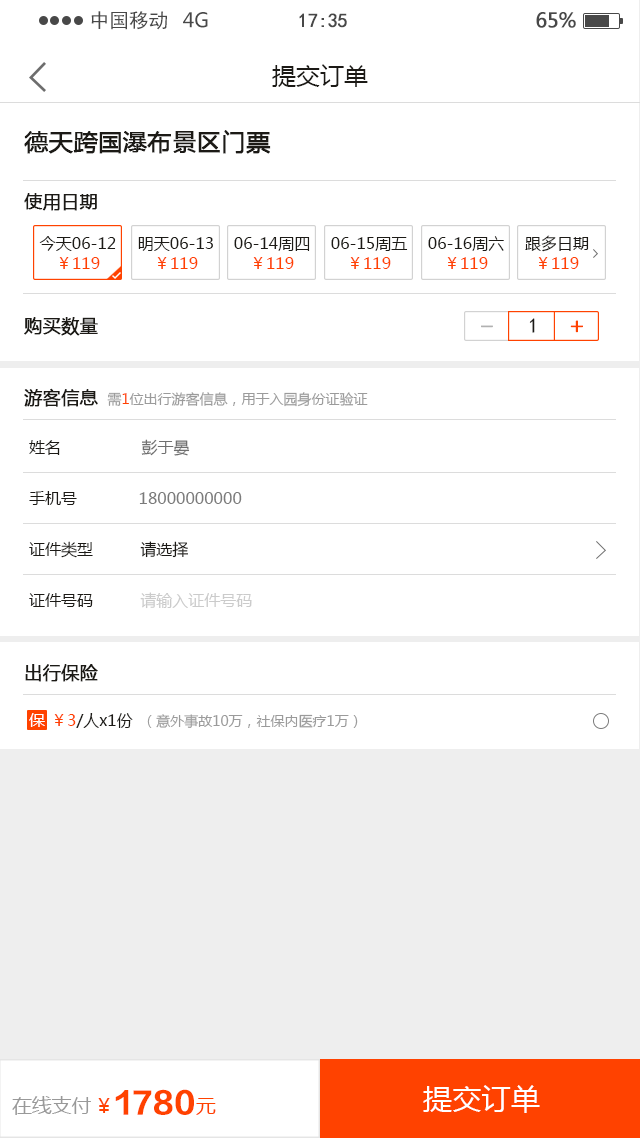
<style>
.page{position:relative;width:640px;height:1138px;background:#ffffff}
.page>*{position:absolute;margin:0}
.t1{font:19.7px "SimHei";color:#484848}
.t2{font:19.7px "MicrosoftYaHei";color:#484848}
.t3{font:19.7px "SimHei";letter-spacing:-0.022em;color:#484848;font-weight:bold}
.t4{font:19.7px "MicrosoftYaHei";letter-spacing:-0.022em;color:#484848;font-weight:bold}
.t5{font:24px "MicrosoftYaHei";color:#1c1a16}
.t6{font:24px "MicrosoftYaHei";color:#1c1a16;font-weight:bold}
.t7{font:18px "MicrosoftYaHei";color:#1c1a16;font-weight:bold}
.t8{font:16px/20px "MicrosoftYaHei";color:#1c1a16}
.t9{font:16px/20px "MicrosoftYaHei";color:#ff4200}
.t10{font:21.1px "SimHei";color:#1c1a16}
.t11{font:21.1px "Tensentype-BoDangXingKaiJ";color:#b1b1b1;font-weight:bold}
.t12{font:21.1px "Tensentype-BoDangXingKaiJ";color:#ff4200;font-weight:bold}
.t13{font:14px "MicrosoftYaHei";color:#9b9b9b}
.t14{font:14px "MicrosoftYaHei";color:#ff4200}
.t15{font:16px "MicrosoftYaHei";color:#6f6f6f}
.t16{font:16px "MicrosoftYaHei";color:#1c1a16}
.t17{font:16px "MicrosoftYaHei";color:#7b7b7b}
.t18{font:16px "MicrosoftYaHei";color:#cbcbcb}
.t19{font:16px "MicrosoftYaHei";color:#ffffff}
.t20{font:16px "MicrosoftYaHei";color:#ff4200}
.t21{font:29.3px "MicrosoftYaHei";color:#ffffff}
.t22{font:19.8px "MicrosoftYaHei";color:#999999}
.t23{font:30px "FZLTDHK--GBK1-0";color:#ff4200}
.t24{font:19.8px "MicrosoftYaHei";color:#ff4200}
</style>
<div class="page">
<p class="t1" style="left:91px;top:11px;width:76px;height:19px">中国移动</p>
<p class="t2" style="left:183px;top:12px;width:25px;height:16px">4G</p>
<p class="t3" style="left:299px;top:13px;width:48px;height:15px">17:35</p>
<p class="t4" style="left:536px;top:12px;width:40px;height:16px">65%</p>
<p class="t5" style="left:272px;top:64px;width:96px;height:23px">提交订单</p>
<p class="t6" style="left:24px;top:130px;width:247px;height:24px">德天跨国瀑布景区门票</p>
<p class="t7" style="left:24px;top:193px;width:73px;height:18px">使用日期</p>
<p class="t8" style="left:39px;top:236px;width:77px;height:33px;text-align:center">今天06-12<br><span class="t9">￥119</span></p>
<p class="t8" style="left:138px;top:237px;width:75px;height:32px;text-align:center">明天06-13<br><span class="t9">￥119</span></p>
<p class="t8" style="left:234px;top:237px;width:76px;height:32px;text-align:center">06-14周四<br><span class="t9">￥119</span></p>
<p class="t8" style="left:331px;top:237px;width:77px;height:32px;text-align:center">06-15周五<br><span class="t9">￥119</span></p>
<p class="t8" style="left:428px;top:236px;width:76px;height:33px;text-align:center">06-16周六<br><span class="t9">￥119</span></p>
<p class="t8" style="left:525px;top:235px;width:64px;height:34px;text-align:center">跟多日期<br><span class="t9">￥119</span></p>
<p class="t7" style="left:24px;top:317px;width:74px;height:19px">购买数量</p>
<p class="t10" style="left:529px;top:318px;width:6px;height:15px">1</p>
<p class="t11" style="left:481px;top:325px;width:12px;height:3px">-</p>
<p class="t12" style="left:570px;top:320px;width:13px;height:13px">+</p>
<p class="t13" style="left:24px;top:388px;width:344px;height:19px"><span class="t7">游客信息  </span>需<span class="t14">1</span>位出行游客信息，用于入园身份证验证</p>
<p class="t15" style="left:29px;top:439px;width:161px;height:17px"><span class="t16">姓名                 </span>彭于晏</p>
<p class="t17" style="left:29px;top:491px;width:213px;height:14px"><span class="t16">手机号             </span>18000000000</p>
<p class="t16" style="left:29px;top:541px;width:159px;height:17px">证件类型          请选择</p>
<p class="t18" style="left:29px;top:592px;width:223px;height:17px"><span class="t16">证件号码          </span>请输入证件号码</p>
<p class="t7" style="left:25px;top:664px;width:73px;height:18px">出行保险</p>
<p class="t19" style="left:29px;top:713px;width:16px;height:14px">保</p>
<p class="t13" style="left:54px;top:713px;width:304px;height:15px"><span class="t20">￥3</span><span class="t16">/人x1份  </span>（意外事故10万，社保内医疗1万）</p>
<p class="t21" style="left:423px;top:1085px;width:117px;height:28px">提交订单</p>
<p class="t22" style="left:12px;top:1096px;width:79px;height:19px">在线支付</p>
<p class="t23" style="left:115px;top:1089px;width:79px;height:26px">1780</p>
<p class="t24" style="left:98px;top:1098px;width:118px;height:17px">￥              元</p>
</div>
